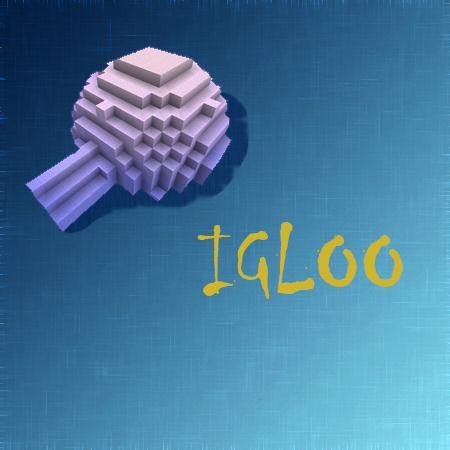
<style>
.page{position:relative;width:450px;height:450px}
.page>*{position:absolute;margin:0}
.t1{font:100px "Chiller-Regular";color:#cfb52b}
</style>
<div class="page">
<p class="t1" style="left:197px;top:222px;width:206px;height:77px">IGLOO</p>
</div>
